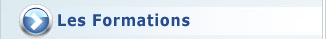
<style>
.page{position:relative;width:326px;height:39px}
.page>*{position:absolute;margin:0}
.t1{font:16.2px "Verdana-Bold";letter-spacing:0.05em;color:#264c8a;scale:0.89 1}
</style>
<div class="page">
<p class="t1" style="left:58px;top:13px;width:132px;height:14px">Les Formations</p>
</div>
